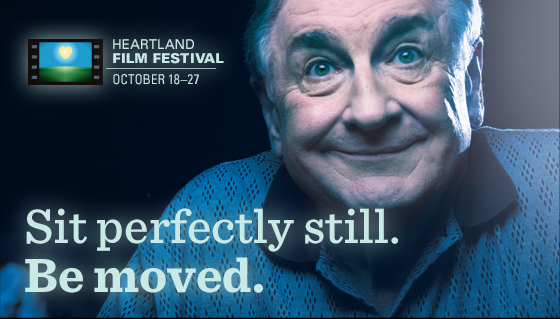
<style>
.page{position:relative;width:560px;height:319px}
.page>*{position:absolute;margin:0}
.t1{font:13.5px/13.5px "Univers-Black";color:#c9e9e6;text-transform:uppercase}
.t2{font:13.5px/13.5px "Univers";color:#c9e9e6;text-transform:uppercase}
.t3{font:13.5px/19.8px "Univers-Condensed";color:#c9e9e6;text-transform:uppercase}
.t4{font:50px/48.4px "Sentinel-Medium";color:#c9e9e6}
.t5{font:50px/48.4px "Sentinel-Bold";color:#c9e9e6}
</style>
<div class="page">
<p class="t1" style="left:113px;top:39px;width:111px;height:46px"><span class="t2">Heartland<br></span>Film Festival<br><span class="t3">October 18–27</span></p>
<p class="t4" style="left:25px;top:208px;width:373px;height:85px">Sit perfectly still.<br><span class="t5">Be moved.</span></p>
</div>
